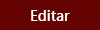
<style>
.page{position:relative;width:100px;height:30px;background:#650202}
.page>*{position:absolute;margin:0}
.t1{font:15px "SegoeUI-Semibold";color:#ffffff}
</style>
<div class="page">
<p class="t1" style="left:31px;top:10px;width:39px;height:11px">Editar</p>
</div>
